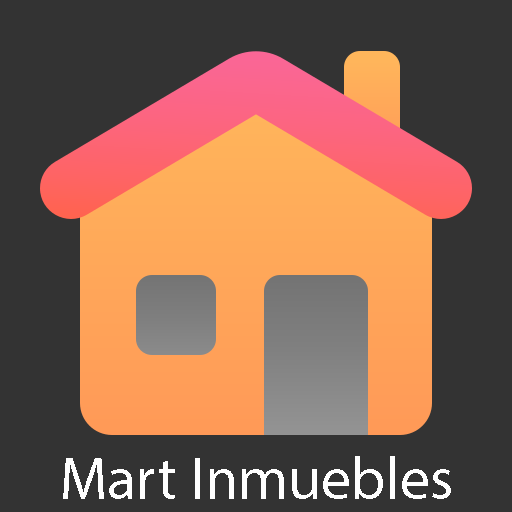
<style>
.page{position:relative;width:512px;height:512px;background:#333333}
.page>*{position:absolute;margin:0}
.t1{font:60px "MyriadPro-Regular";color:#ffffff}
</style>
<div class="page">
<p class="t1" style="left:63px;top:456px;width:388px;height:43px">Mart Inmuebles</p>
</div>
